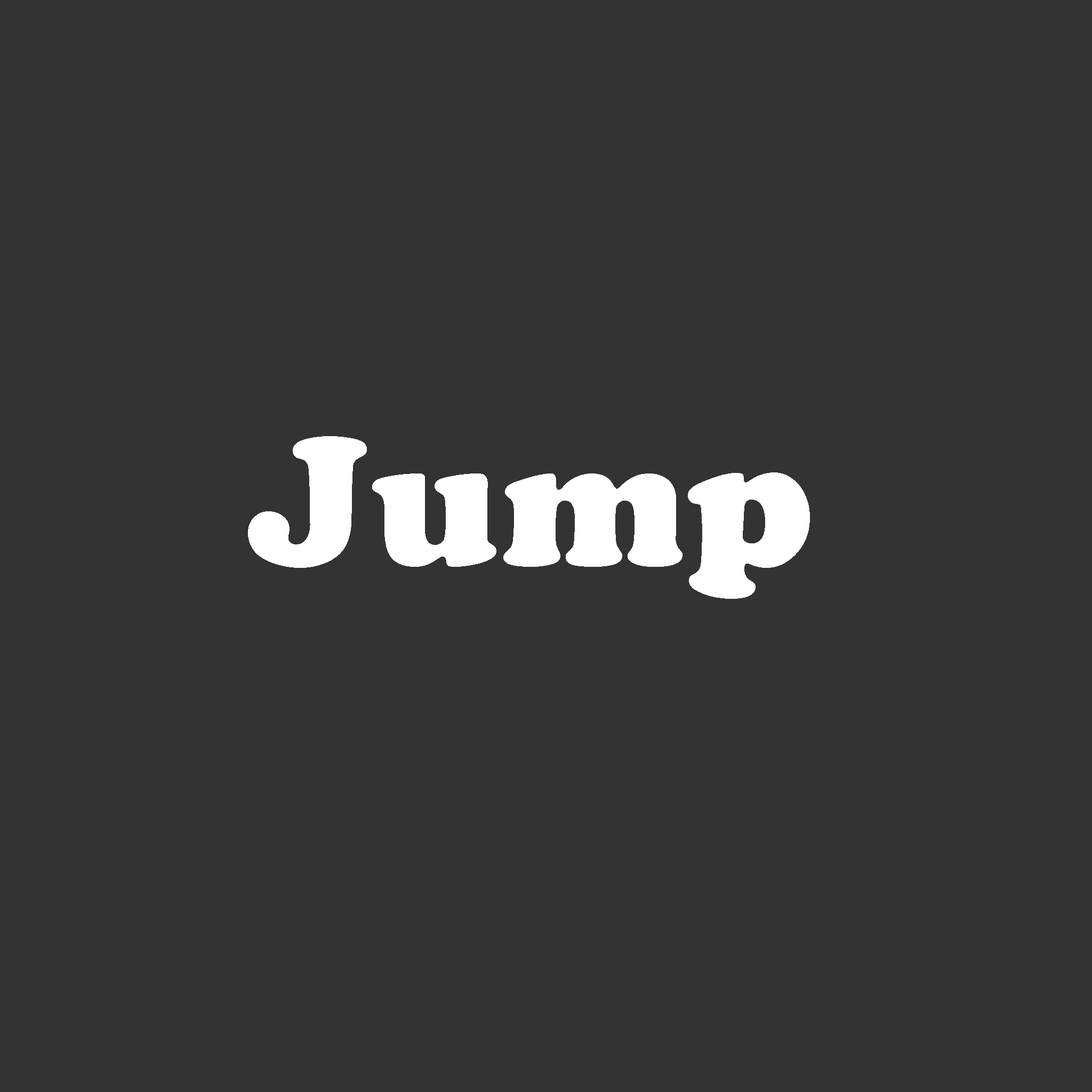
<style>
.page{position:relative;width:1092px;height:1092px;background:#333333}
.page>*{position:absolute;margin:0}
.t1{font:190.4px "CooperBlack";letter-spacing:0.01em;color:#ffffff}
</style>
<div class="page">
<p class="t1" style="left:248px;top:436px;width:562px;height:163px">Jump</p>
</div>
